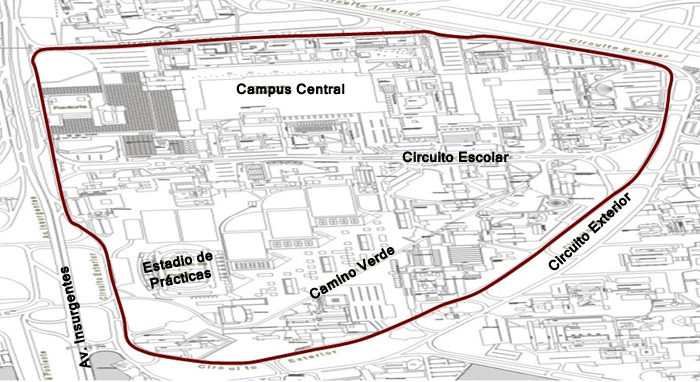
<style>
.page{position:relative;width:700px;height:382px;background:#ffffff}
.page>*{position:absolute;margin:0}
.t1{font:14px "Kartika-Bold";color:#030000}
</style>
<div class="page">
<p class="t1" style="left:236px;top:83px;width:109px;height:14px">Campus Central</p>
<p class="t1" style="left:402px;top:151px;width:107px;height:12px">Circuito Escolar</p>
<p class="t1" style="left:548px;top:192px;width:83px;height:79px;rotate:-43deg">Circuito Exterior</p>
<p class="t1" style="left:142px;top:251px;width:71px;height:38px;rotate:-11deg">Estadio de<br> Prácticas</p>
<p class="t1" style="left:310px;top:247px;width:85px;height:52px;rotate:-30deg">Camino Verde</p>
<p class="t1" style="left:60px;top:266px;width:31px;height:102px;rotate:-103deg">Av. Insurgentes</p>
</div>
